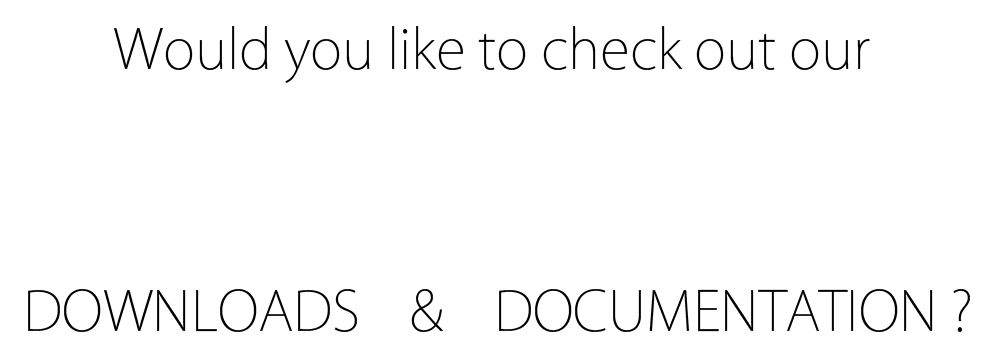
<style>
.page{position:relative;width:1000px;height:364px;background:#ffffff}
.page>*{position:absolute;margin:0}
.t1{font:54.6px "KozGoPr6N-ExtraLight";color:#000000}
</style>
<div class="page">
<p class="t1" style="left:28px;top:26px;width:942px;height:306px;text-align:center">Would you like to check out our <br><br><br><br>DOWNLOADS    &amp;    DOCUMENTATION ?</p>
</div>
